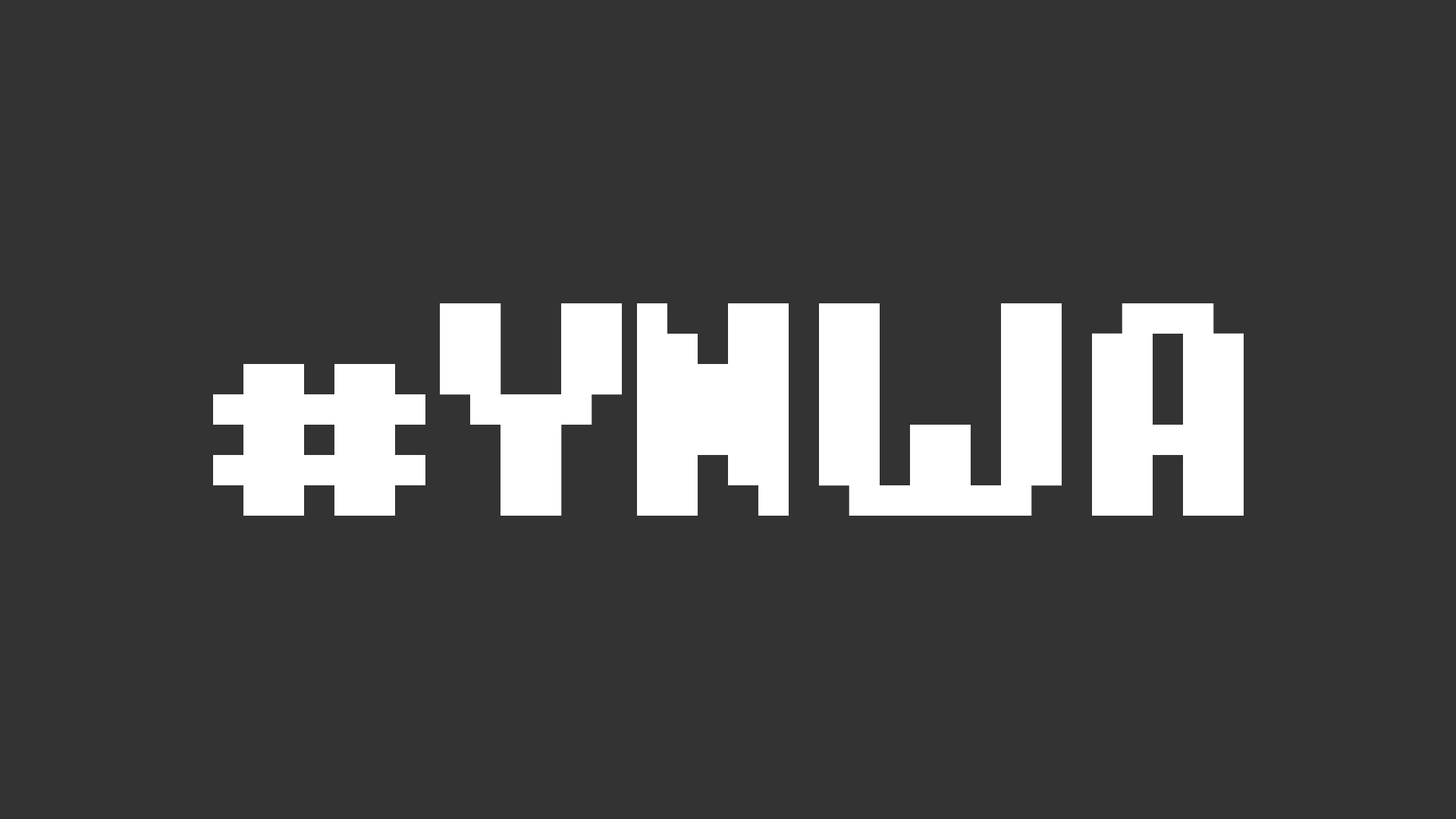
<style>
.page{position:relative;width:1456px;height:819px;background:#333333}
.page>*{position:absolute;margin:0}
.t1{font:303.3px "Hardpixel";color:#ffffff}
</style>
<div class="page">
<p class="t1" style="left:213px;top:303px;width:1031px;height:213px">YNWA#</p>
</div>
